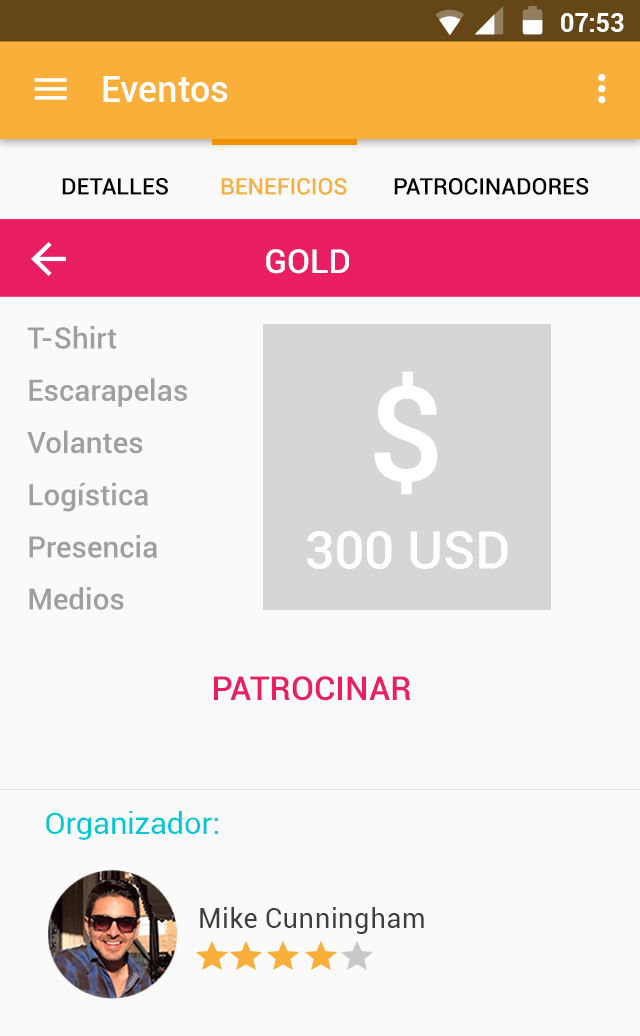
<style>
.page{position:relative;width:640px;height:1036px;background:#fafafa}
.page>*{position:absolute;margin:0}
.t1{font:24.9px "Roboto-Bold";color:#ffffff}
.t2{font:35.8px "Roboto-Medium";letter-spacing:0.005em;color:#ffffff}
.t3{font:22.9px "Roboto-Medium";color:#000000}
.t4{font:22.9px "Roboto-Medium";color:#faaf3a}
.t5{font:33.3px "Roboto-Medium";color:#ffffff}
.t6{font:29.3px "Roboto-Medium";color:#9f9f9f}
.t7{font:131.7px "Roboto-Medium";color:#ffffff}
.t8{font:52.1px "Roboto-Medium";color:#ffffff}
.t9{font:33.3px "Roboto-Medium";color:#e91e63}
.t10{font:30.5px "Roboto-Regular";letter-spacing:0.01em;color:#00c8d5}
.t11{font:26.7px "Roboto-Regular";letter-spacing:0.01em;color:#3f3f3f}
</style>
<div class="page">
<p class="t1" style="left:561px;top:13px;width:63px;height:19px">07:53</p>
<p class="t2" style="left:103px;top:76px;width:125px;height:26px">Eventos</p>
<p class="t3" style="left:62px;top:178px;width:106px;height:17px">DETALLES</p>
<p class="t4" style="left:221px;top:178px;width:126px;height:17px">BENEFICIOS</p>
<p class="t3" style="left:394px;top:178px;width:195px;height:17px">PATROCINADORES</p>
<p class="t5" style="left:266px;top:249px;width:83px;height:25px">GOLD</p>
<p class="t6" style="left:27px;top:326px;width:90px;height:23px">T-Shirt</p>
<p class="t7" style="left:374px;top:371px;width:64px;height:124px">$</p>
<p class="t6" style="left:29px;top:378px;width:158px;height:29px">Escarapelas</p>
<p class="t6" style="left:27px;top:430px;width:116px;height:24px">Volantes</p>
<p class="t6" style="left:29px;top:482px;width:119px;height:30px">Logística</p>
<p class="t8" style="left:307px;top:531px;width:201px;height:38px">300 USD</p>
<p class="t6" style="left:29px;top:535px;width:128px;height:23px">Presencia</p>
<p class="t6" style="left:29px;top:587px;width:95px;height:23px">Medios</p>
<p class="t9" style="left:214px;top:676px;width:197px;height:25px">PATROCINAR</p>
<p class="t10" style="left:46px;top:811px;width:172px;height:29px">Organizador:</p>
<p class="t11" style="left:200px;top:907px;width:224px;height:27px">Mike Cunningham</p>
</div>
